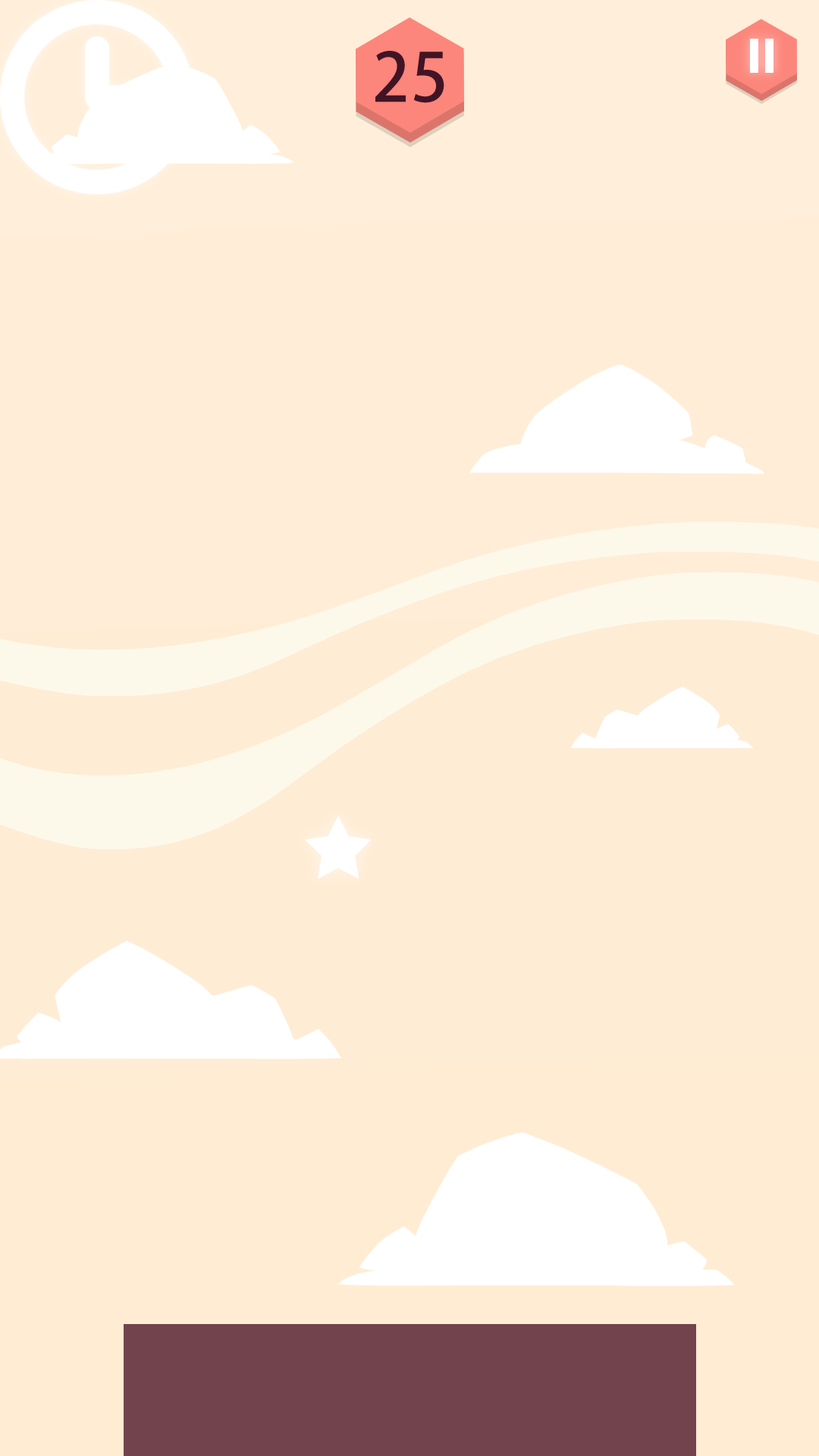
<style>
.page{position:relative;width:819px;height:1456px;background:#ffedd7}
.page>*{position:absolute;margin:0}
.t1{font:66.5px "AdobeFanHeitiStd-Bold";letter-spacing:0.02em;color:#411425}
</style>
<div class="page">
<p class="t1" style="left:375px;top:51px;width:69px;height:52px">25</p>
</div>
